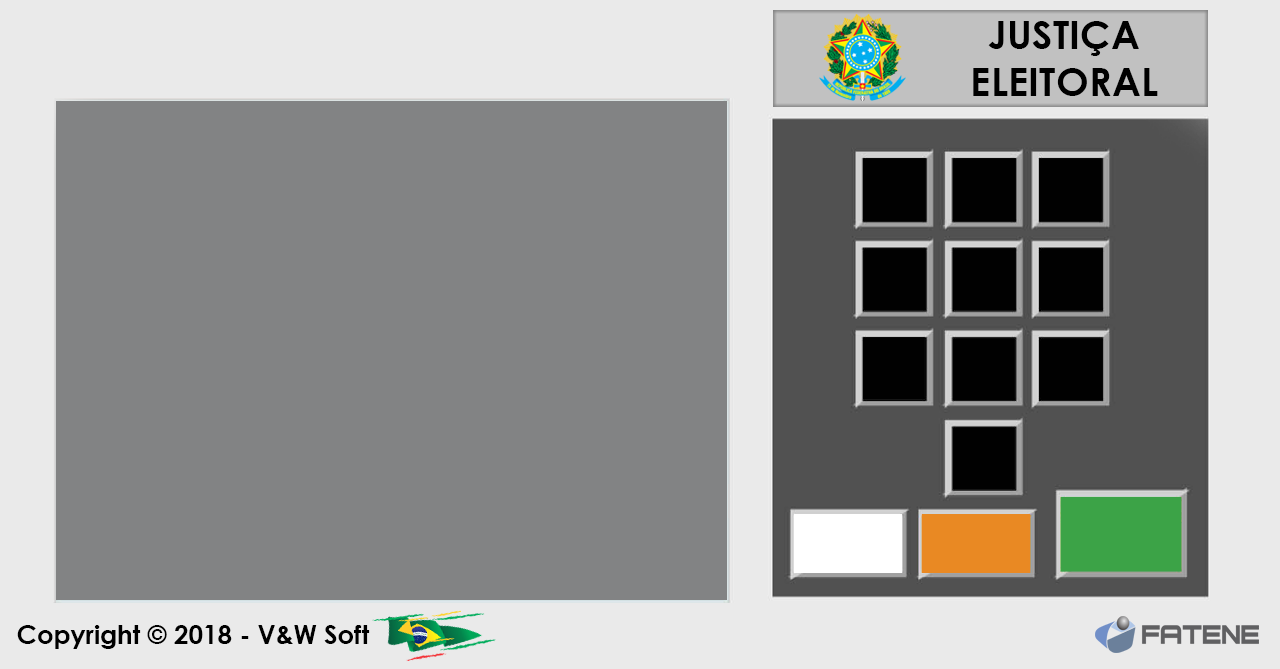
<style>
.page{position:relative;width:1280px;height:669px;background:#828384}
.page>*{position:absolute;margin:0}
.t1{font:39.3px "CenturyGothic-Bold";color:#000000}
.t2{font:25.9px "CenturyGothic-Bold";color:#000000}
</style>
<div class="page">
<p class="t1" style="left:973px;top:21px;width:185px;height:75px;text-align:center">JUSTIÇA<br>ELEITORAL</p>
<p class="t2" style="left:17px;top:625px;width:353px;height:24px">Copyright © 2018 - V&amp;W Soft</p>
</div>
